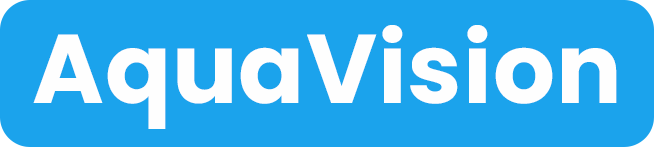
<style>
.page{position:relative;width:654px;height:147px;background:#1ba3ec}
.page>*{position:absolute;margin:0}
.t1{font:97.5px "Poppins-Bold";letter-spacing:0.01em;color:#fefefe}
</style>
<div class="page">
<p class="t1" style="left:33px;top:25px;width:584px;height:104px">AquaVision</p>
</div>
